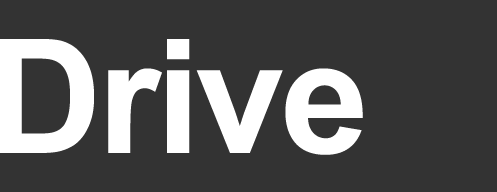
<style>
.page{position:relative;width:497px;height:192px;background:#333333}
.page>*{position:absolute;margin:0}
.t1{font:159px "Arial-BoldMT";letter-spacing:-0.025em;color:#ffffff}
</style>
<div class="page">
<p class="t1" style="left:0px;top:39px;width:363px;height:116px">Drive</p>
</div>
